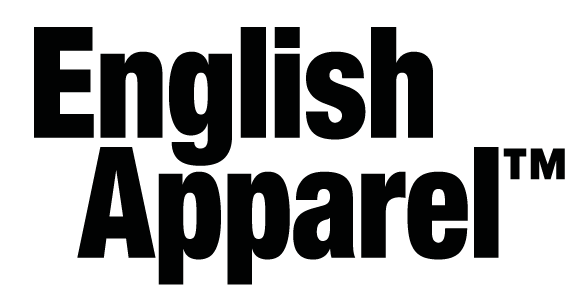
<style>
.page{position:relative;width:588px;height:292px;background:#ffffff}
.page>*{position:absolute;margin:0}
.t1{font:154.8px/30px "HelveticaNeue-CondensedBlack";letter-spacing:0.005em;color:#010202;scale:0.87 1}
.t2{font:154.8px/30px "HelveticaNeue-CondensedBlack";letter-spacing:0.005em;color:#010202;font-variant:small-caps;scale:0.89 1}
.t3{font:154.8px/30px "HelveticaNeue-CondensedBlack";letter-spacing:0.005em;color:#010202;scale:0.89 1}
.t4{font:74.4px/30px "HelveticaNeue-CondensedBlack";letter-spacing:0.005em;color:#010202;font-variant:small-caps;scale:0.86 1}
</style>
<div class="page">
<p class="t1" style="left:34px;top:27px;width:531px;height:258px;text-align:center"><span class="t2">E</span><span class="t3">nglish<br><br></span><br><br>     Apparel<span class="t4">™</span></p>
</div>
